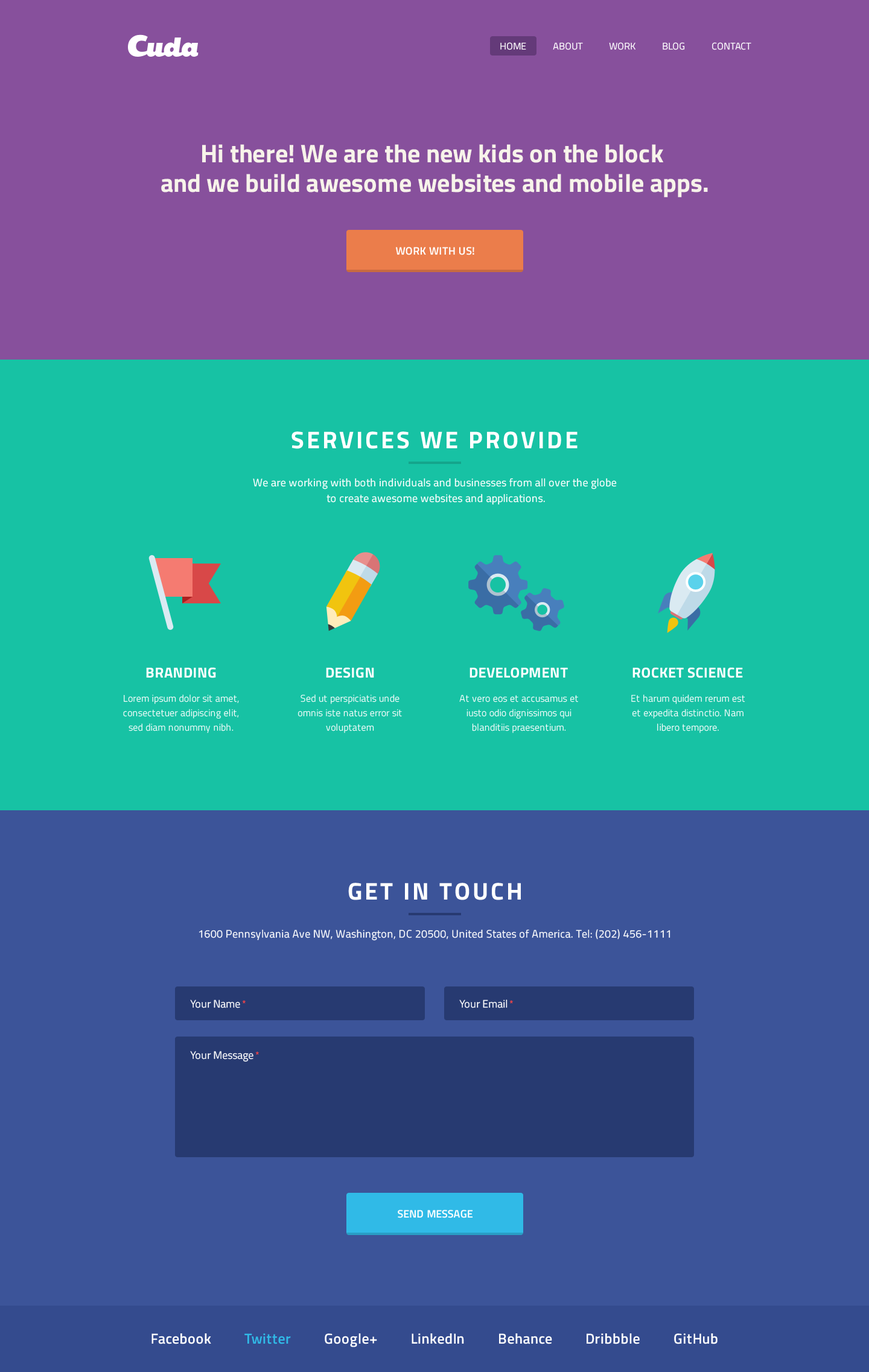
<style>
.page{position:relative;width:869px;height:1372px;background:#17c2a4}
.page>*{position:absolute;margin:0}
.t1{font:9.7px "TitilliumWeb-Regular";color:#ffffff;text-transform:uppercase}
.t2{font:25.4px/29.5px "TitilliumWeb-Bold";color:#f7f3ea}
.t3{font:10.9px "TitilliumWeb-SemiBold";letter-spacing:0.02em;color:#ffffff}
.t4{font:24.1px "TitilliumWeb-Bold";letter-spacing:0.1em;color:#ffffff}
.t5{font:10.9px/15.7px "TitilliumWeb-Regular";letter-spacing:0.02em;color:#ffffff}
.t6{font:14.5px "TitilliumWeb-Bold";letter-spacing:0.02em;color:#ffffff;text-transform:uppercase}
.t7{font:9.7px/14.5px "TitilliumWeb-Light";letter-spacing:0.02em;color:#ffffff}
.t8{font:10.9px "TitilliumWeb-Regular";letter-spacing:0.02em;color:#ffffff}
.t9{font:10.9px "TitilliumWeb-Regular";color:#ffffff}
.t10{font:9.7px "ArialMT";color:#ff4444}
.t11{font:14.5px "TitilliumWeb-SemiBold";letter-spacing:0.02em;color:#ffffff}
.t12{font:14.5px "TitilliumWeb-SemiBold";letter-spacing:0.02em;color:#30bae7}
</style>
<div class="page">
<p class="t1" style="left:500px;top:42px;width:251px;height:8px">Home           About           WORK           Blog           Contact</p>
<p class="t2" style="left:161px;top:144px;width:547px;height:53px;text-align:center">Hi there! We are the new kids on the block <br>and we build awesome websites and mobile apps.</p>
<p class="t3" style="left:396px;top:247px;width:78px;height:8px">WORK WITH US!</p>
<p class="t4" style="left:291px;top:431px;width:287px;height:18px">SERVICES WE PROVIDE</p>
<p class="t5" style="left:253px;top:478px;width:364px;height:27px;text-align:center">We are working with both individuals and businesses from all over the globe <br>to create awesome websites and applications.</p>
<p class="t6" style="left:146px;top:667px;width:70px;height:11px">Branding</p>
<p class="t6" style="left:326px;top:667px;width:48px;height:11px">Design</p>
<p class="t6" style="left:469px;top:667px;width:99px;height:11px">Development</p>
<p class="t6" style="left:632px;top:667px;width:111px;height:11px">ROCKET SCIENCE</p>
<p class="t7" style="left:123px;top:695px;width:116px;height:38px;text-align:center">Lorem ipsum dolor sit amet, <br>consectetuer adipiscing elit, sed diam nonummy nibh.</p>
<p class="t7" style="left:298px;top:695px;width:104px;height:38px;text-align:center">Sed ut perspiciatis unde omnis iste natus error sit voluptatem</p>
<p class="t7" style="left:459px;top:695px;width:119px;height:38px;text-align:center">At vero eos et accusamus et iusto odio dignissimos qui blanditiis praesentium.</p>
<p class="t7" style="left:631px;top:695px;width:114px;height:38px;text-align:center">Et harum quidem rerum est et expedita distinctio. Nam libero tempore.</p>
<p class="t4" style="left:348px;top:883px;width:173px;height:17px">GET IN TOUCH</p>
<p class="t8" style="left:199px;top:929px;width:471px;height:12px">1600 Pennsylvania Ave NW, Washington, DC 20500, United States of America. Tel: (202) 456-1111</p>
<p class="t9" style="left:190px;top:1000px;width:56px;height:8px">Your Name <span class="t10">*</span></p>
<p class="t9" style="left:459px;top:999px;width:54px;height:9px">Your Email <span class="t10">*</span></p>
<p class="t9" style="left:190px;top:1051px;width:69px;height:11px">Your Message <span class="t10">*</span></p>
<p class="t3" style="left:398px;top:1210px;width:75px;height:8px">SEND MESSAGE</p>
<p class="t11" style="left:151px;top:1334px;width:567px;height:14px">Facebook          <span class="t12">Twitter</span>          Google+          LinkedIn          Behance          Dribbble          GitHub</p>
</div>
